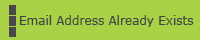
<style>
.page{position:relative;width:200px;height:40px;background:#a9d246}
.page>*{position:absolute;margin:0}
.t1{font:12px "Verdana";color:#454545}
</style>
<div class="page">
<p class="t1" style="left:20px;top:15px;width:174px;height:12px">Email Address Already Exists</p>
</div>
